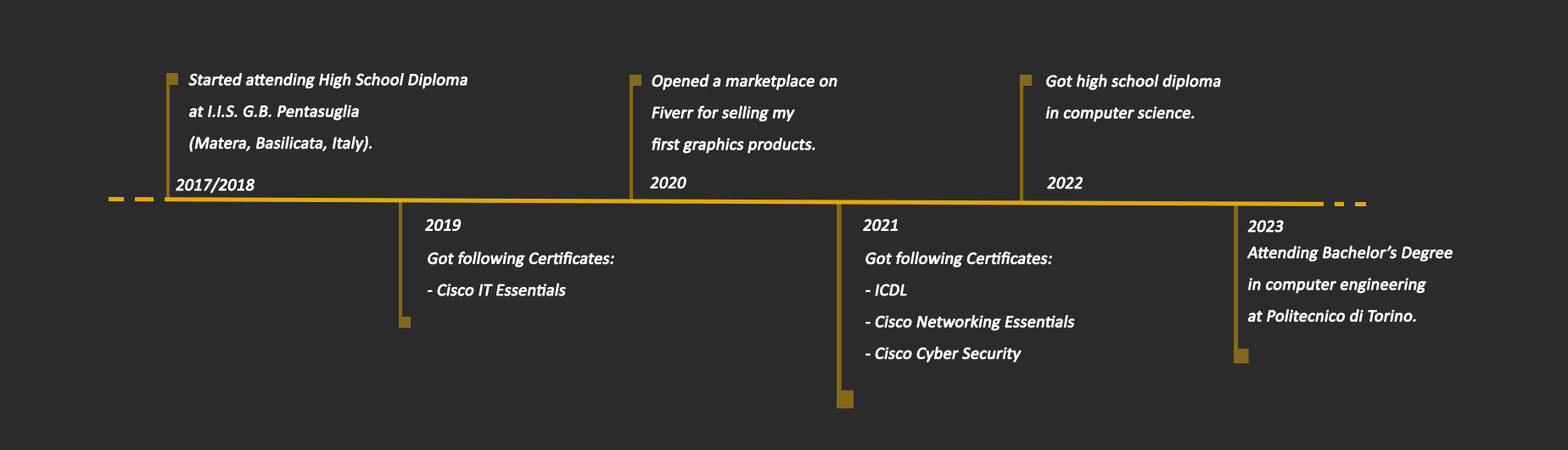
<style>
.page{position:relative;width:1568px;height:450px;background:#2b2b2b}
.page>*{position:absolute;margin:0}
.t1{font:17.3px/31.6px "Calibri";letter-spacing:-0.015em;color:#ffffff;font-weight:bold;font-style:italic}
.t2{font:17.3px "Calibri";letter-spacing:-0.015em;color:#ffffff;font-weight:bold;font-style:italic}
</style>
<div class="page">
<p class="t1" style="left:188px;top:73px;width:280px;height:79px">Started attending High School Diploma<br>at I.I.S. G.B. Pentasuglia<br>(Matera, Basilicata, Italy).</p>
<p class="t1" style="left:652px;top:74px;width:185px;height:80px">Opened a marketplace on<br>Fiverr for selling my <br>first graphics products.</p>
<p class="t1" style="left:1045px;top:74px;width:176px;height:48px">Got high school diploma <br>in computer science.</p>
<p class="t2" style="left:176px;top:177px;width:79px;height:16px">2017/2018</p>
<p class="t2" style="left:650px;top:176px;width:36px;height:13px">2020</p>
<p class="t2" style="left:1047px;top:176px;width:36px;height:13px">2022</p>
<p class="t2" style="left:425px;top:219px;width:37px;height:12px">2019</p>
<p class="t2" style="left:863px;top:219px;width:35px;height:12px">2021</p>
<p class="t2" style="left:1247px;top:220px;width:37px;height:12px">2023</p>
<p class="t1" style="left:1247px;top:245px;width:206px;height:77px">Attending Bachelor’s Degree <br>in computer engineering<br>at Politecnico di Torino.</p>
<p class="t1" style="left:427px;top:251px;width:187px;height:45px">Got following Certificates:<br>- Cisco IT Essentials</p>
<p class="t1" style="left:865px;top:251px;width:210px;height:111px">Got following Certificates:<br>- ICDL<br>- Cisco Networking Essentials<br>- Cisco Cyber Security</p>
</div>
